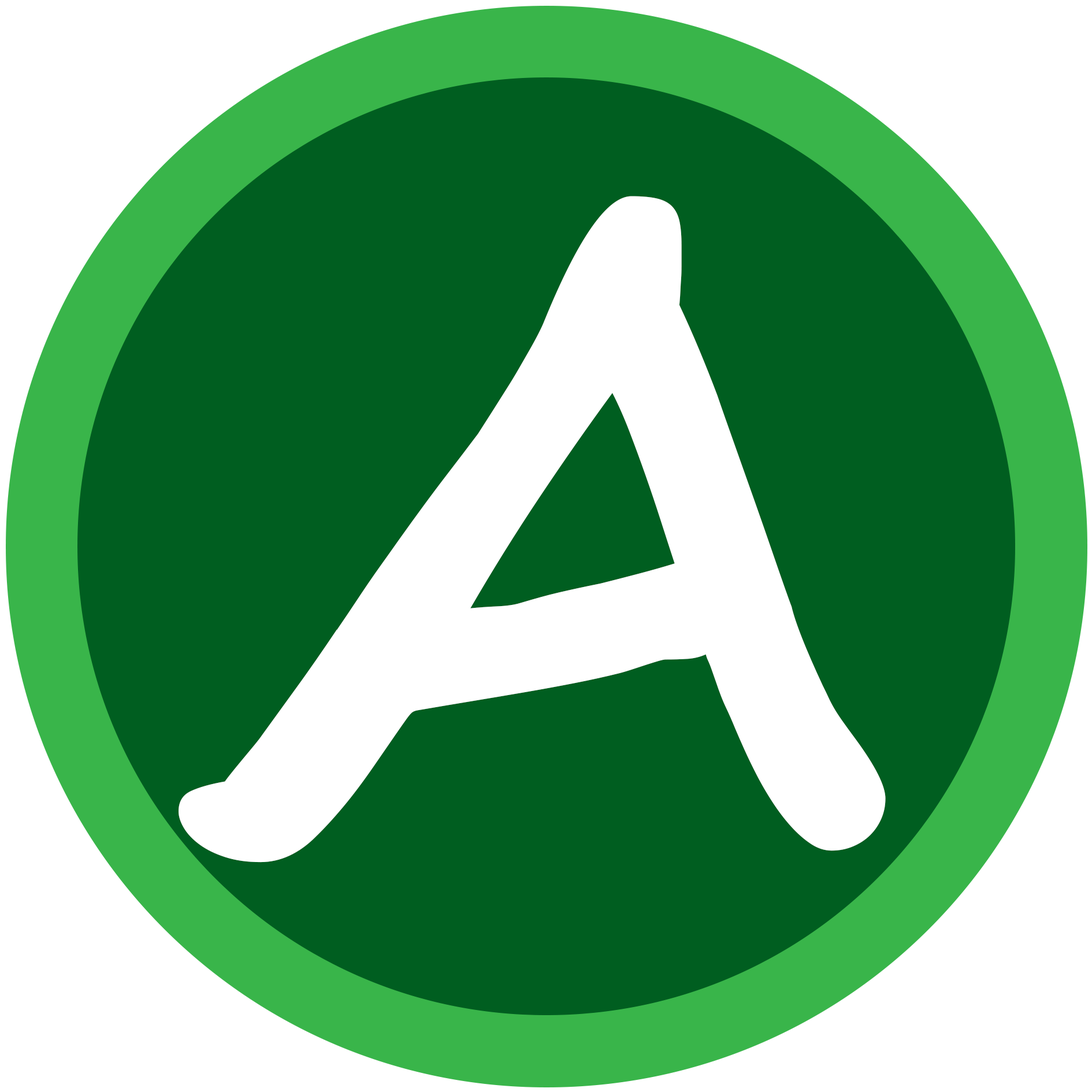
<style>
.page{position:relative;width:1092px;height:1092px;background:#005e20}
.page>*{position:absolute;margin:0}
.t1{font:873.8px "SegoeScript-Bold";color:#ffffff}
</style>
<div class="page">
<p class="t1" style="left:179px;top:196px;width:707px;height:667px">A</p>
</div>
